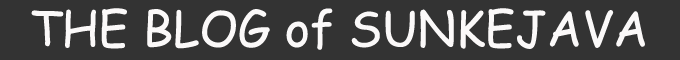
<style>
.page{position:relative;width:680px;height:60px;background:#333333}
.page>*{position:absolute;margin:0}
.t1{font:48px "ComicSansMS";color:#fbf9f9}
</style>
<div class="page">
<p class="t1" style="left:31px;top:8px;width:614px;height:42px">THE BLOG of SUNKEJAVA</p>
</div>
